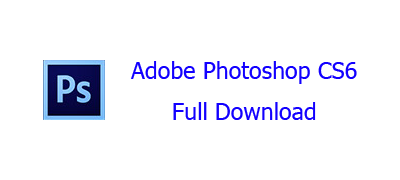
<style>
.page{position:relative;width:400px;height:180px;background:#ffffff}
.page>*{position:absolute;margin:0}
.t1{font:23.3px "Tahoma";color:#1200ff}
</style>
<div class="page">
<p class="t1" style="left:131px;top:61px;width:226px;height:23px">Adobe Photoshop CS6</p>
<p class="t1" style="left:173px;top:102px;width:143px;height:18px">Full Download</p>
</div>
